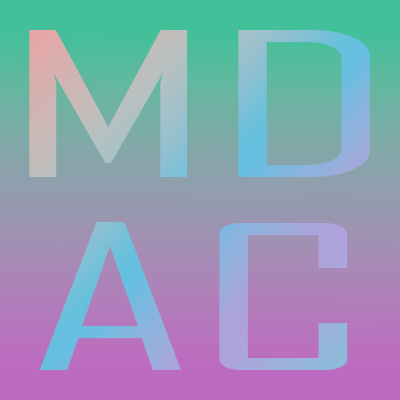
<style>
.page{position:relative;width:400px;height:400px}
.page>*{position:absolute;margin:0}
.t1{font:192.8px/192.8px "AgencyFB-Reg";scale:2.16 1}
</style>
<div class="page">
<p class="t1" style="left:29px;top:30px;width:341px;height:340px;text-align:center">MD<br>AC</p>
</div>
